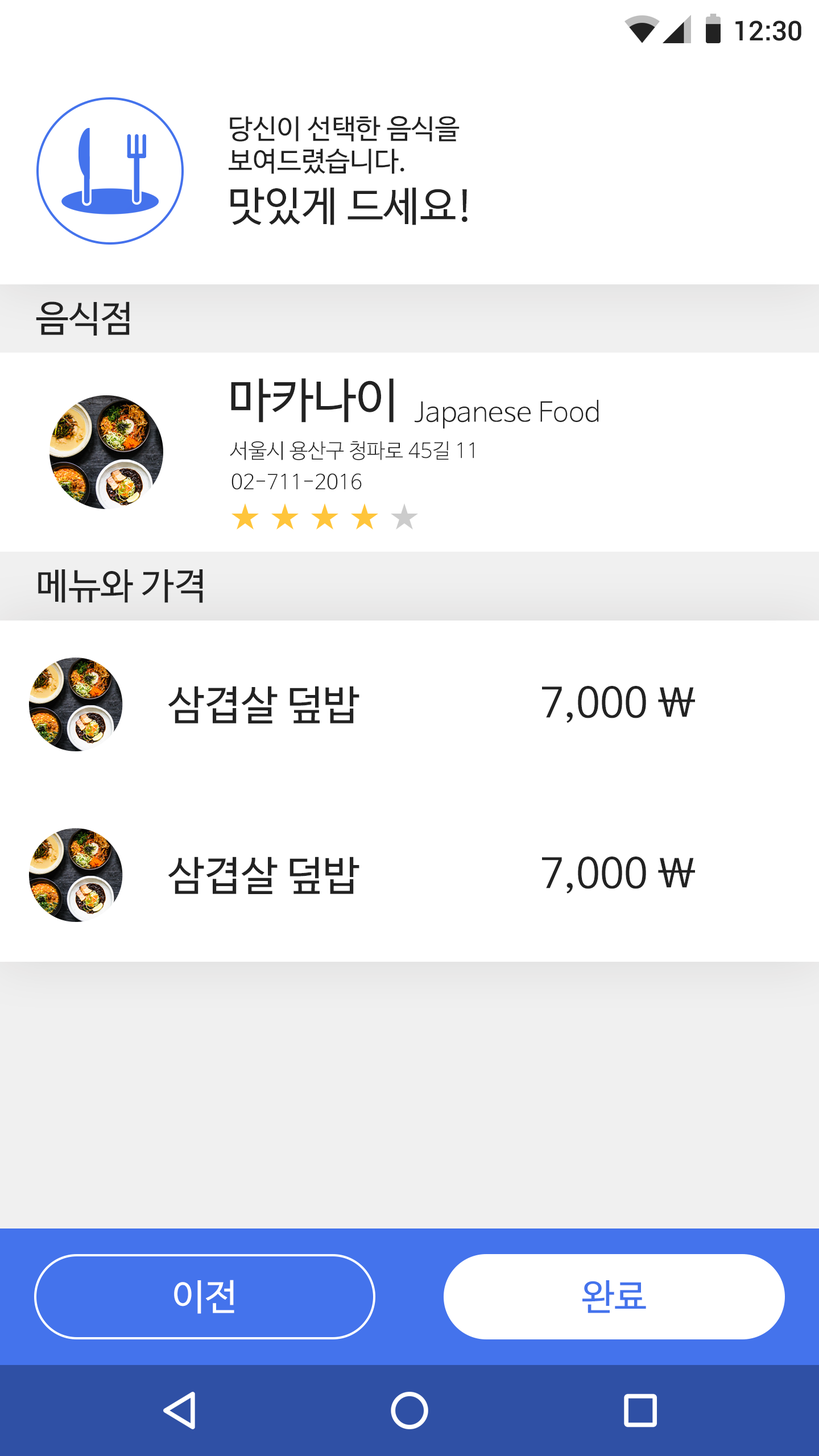
<style>
.page{position:relative;width:819px;height:1456px;background:#ffffff}
.page>*{position:absolute;margin:0}
.t1{font:27.3px "Roboto-Medium";color:#222222}
.t2{font:27.3px "NanumBarunGothic";color:#222222}
.t3{font:40.9px "NanumBarunGothic";color:#222222}
.t4{font:36.4px "NanumBarunGothic";color:#222222}
.t5{font:47.8px "NanumBarunGothic";color:#222222}
.t6{font:27.3px "NanumBarunGothicLight";color:#222222}
.t7{font:20.5px "NanumBarunGothicLight";color:#222222}
.t8{font:36.4px "NanumBarunGothic";color:#ffffff}
.t9{font:36.4px "NanumBarunGothic";color:#4473ec}
</style>
<div class="page">
<p class="t1" style="left:735px;top:20px;width:66px;height:21px">12:30</p>
<p class="t2" style="left:229px;top:116px;width:231px;height:58px">당신이 선택한 음식을<br>보여드렸습니다.</p>
<p class="t3" style="left:230px;top:187px;width:238px;height:38px">맛있게 드세요!</p>
<p class="t4" style="left:36px;top:301px;width:94px;height:35px">음식점</p>
<p class="t5" style="left:231px;top:378px;width:163px;height:45px">마카나이</p>
<p class="t6" style="left:415px;top:400px;width:184px;height:29px">Japanese Food</p>
<p class="t7" style="left:230px;top:441px;width:244px;height:19px">서울시 용산구 청파로 45길 11</p>
<p class="t7" style="left:231px;top:473px;width:131px;height:17px">02-711-2016</p>
<p class="t4" style="left:38px;top:569px;width:165px;height:34px">메뉴와 가격</p>
<p class="t3" style="left:168px;top:686px;width:191px;height:37px">삼겹살 덮밥</p>
<p class="t3" style="left:542px;top:686px;width:153px;height:37px">7,000 \</p>
<p class="t3" style="left:168px;top:857px;width:191px;height:37px">삼겹살 덮밥</p>
<p class="t3" style="left:542px;top:857px;width:153px;height:36px">7,000 \</p>
<p class="t8" style="left:174px;top:1280px;width:60px;height:34px">이전</p>
<p class="t9" style="left:582px;top:1280px;width:64px;height:33px">완료</p>
</div>
